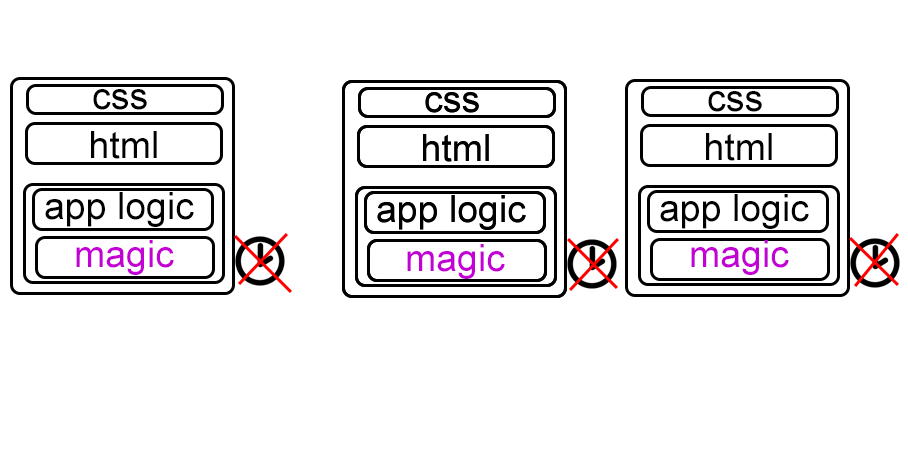
<style>
.page{position:relative;width:908px;height:450px;background:#ffffff}
.page>*{position:absolute;margin:0}
.t1{font:37.5px "ArialMT";color:#000000}
.t2{font:37.5px "ArialMT";color:#c301d4}
</style>
<div class="page">
<p class="t1" style="left:93px;top:89px;width:54px;height:21px">css</p>
<p class="t1" style="left:425px;top:92px;width:54px;height:21px">css</p>
<p class="t1" style="left:425px;top:92px;width:54px;height:21px">css</p>
<p class="t1" style="left:708px;top:91px;width:54px;height:21px">css</p>
<p class="t1" style="left:91px;top:131px;width:66px;height:28px">html</p>
<p class="t1" style="left:423px;top:134px;width:66px;height:28px">html</p>
<p class="t1" style="left:423px;top:134px;width:66px;height:28px">html</p>
<p class="t1" style="left:706px;top:133px;width:66px;height:28px">html</p>
<p class="t1" style="left:45px;top:192px;width:149px;height:35px">app logic</p>
<p class="t1" style="left:377px;top:195px;width:149px;height:35px">app logic</p>
<p class="t1" style="left:377px;top:195px;width:149px;height:35px">app logic</p>
<p class="t1" style="left:660px;top:194px;width:149px;height:35px">app logic</p>
<p class="t2" style="left:76px;top:240px;width:98px;height:35px">magic</p>
<p class="t2" style="left:407px;top:244px;width:98px;height:35px">magic</p>
<p class="t2" style="left:691px;top:240px;width:98px;height:35px">magic</p>
</div>
